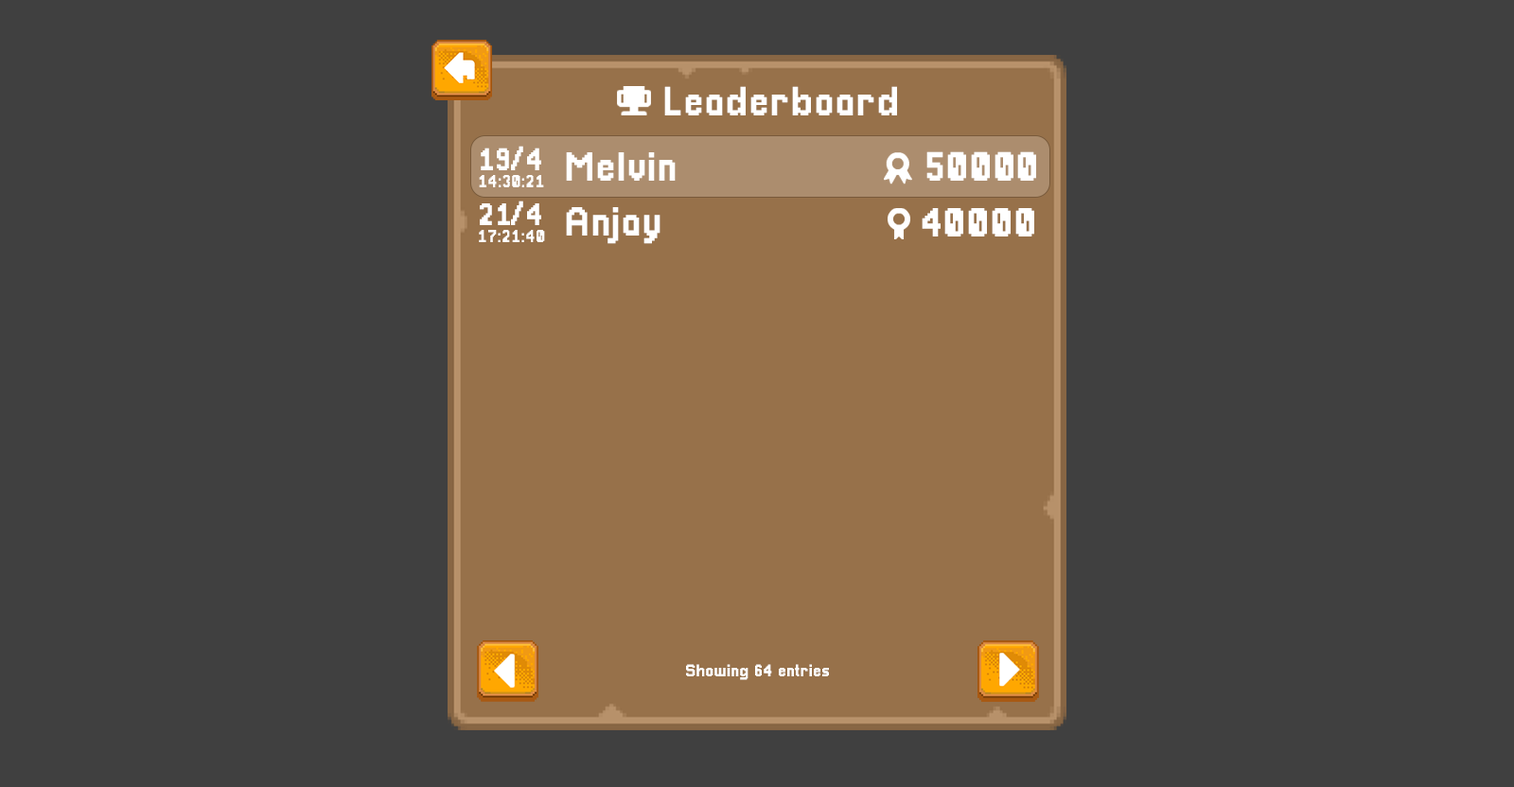
<style>
.page{position:relative;width:1514px;height:787px;background:#404040}
.page>*{position:absolute;margin:0}
.t1{font:41.6px "Pixellari";color:#ffffff}
.t2{font:31.9px "Pixellari";color:#ffffff}
.t3{font:41.4px "Pixellari";color:#ffffff}
.t4{font:17.9px "Pixellari";color:#ffffff}
.t5{font:31.7px "Pixellari";color:#ffffff}
.t6{font:41.1px "Pixellari";color:#ffffff}
.t7{font:17.8px "Pixellari";color:#ffffff}
.t8{font:17.1px "Pixellari";color:#ffffff}
</style>
<div class="page">
<p class="t1" style="left:664px;top:86px;width:233px;height:29px">Leaderboard</p>
<p class="t2" style="left:481px;top:146px;width:60px;height:24px">19/4</p>
<p class="t3" style="left:566px;top:152px;width:110px;height:29px">Melvin</p>
<p class="t1" style="left:927px;top:151px;width:109px;height:30px">50000</p>
<p class="t4" style="left:479px;top:175px;width:65px;height:12px">14:30:21</p>
<p class="t5" style="left:480px;top:201px;width:61px;height:24px">21/4</p>
<p class="t6" style="left:566px;top:207px;width:95px;height:37px">Anjay</p>
<p class="t3" style="left:922px;top:208px;width:112px;height:29px">40000</p>
<p class="t7" style="left:479px;top:230px;width:66px;height:12px">17:21:40</p>
<p class="t8" style="left:686px;top:664px;width:143px;height:16px">Showing 64 entries</p>
</div>
